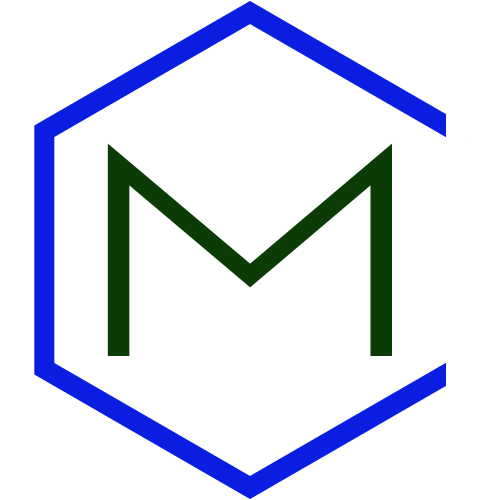
<style>
.page{position:relative;width:500px;height:500px;background:#ffffff}
.page>*{position:absolute;margin:0}
.t1{font:282.5px "BonvenoCF-Light";color:#0b3c05;scale:1.41 1}
</style>
<div class="page">
<p class="t1" style="left:107px;top:143px;width:286px;height:214px">M</p>
</div>
